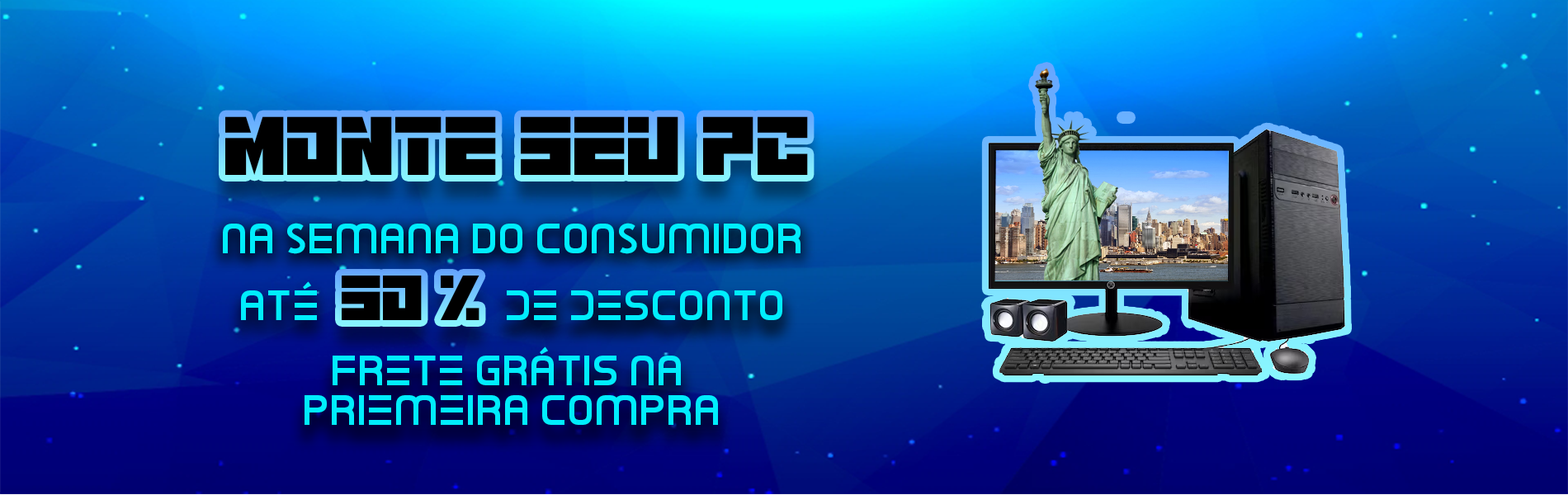
<style>
.page{position:relative;width:1568px;height:495px}
.page>*{position:absolute;margin:0}
.t1{font:108px "RobotMonster";color:#000000;scale:0.79 1}
.t2{font:39.6px "NeonAndroid";color:#00edfd}
.t3{font:82.8px "RobotMonster";color:#000000;scale:0.79 1}
.t4{font:39.6px/39.6px "NeonAndroid";color:#00edfd}
</style>
<div class="page">
<p class="t1" style="left:225px;top:116px;width:583px;height:59px">MONTE SEU PC</p>
<p class="t2" style="left:223px;top:223px;width:578px;height:31px">NA SEMANA DO CONSUMIDOR</p>
<p class="t2" style="left:241px;top:281px;width:76px;height:39px">Até</p>
<p class="t3" style="left:342px;top:276px;width:137px;height:44px">50 %</p>
<p class="t2" style="left:507px;top:290px;width:275px;height:30px">de desconto</p>
<p class="t4" style="left:305px;top:347px;width:413px;height:78px;text-align:center">frete grátis na <br>priemeira compra</p>
</div>
